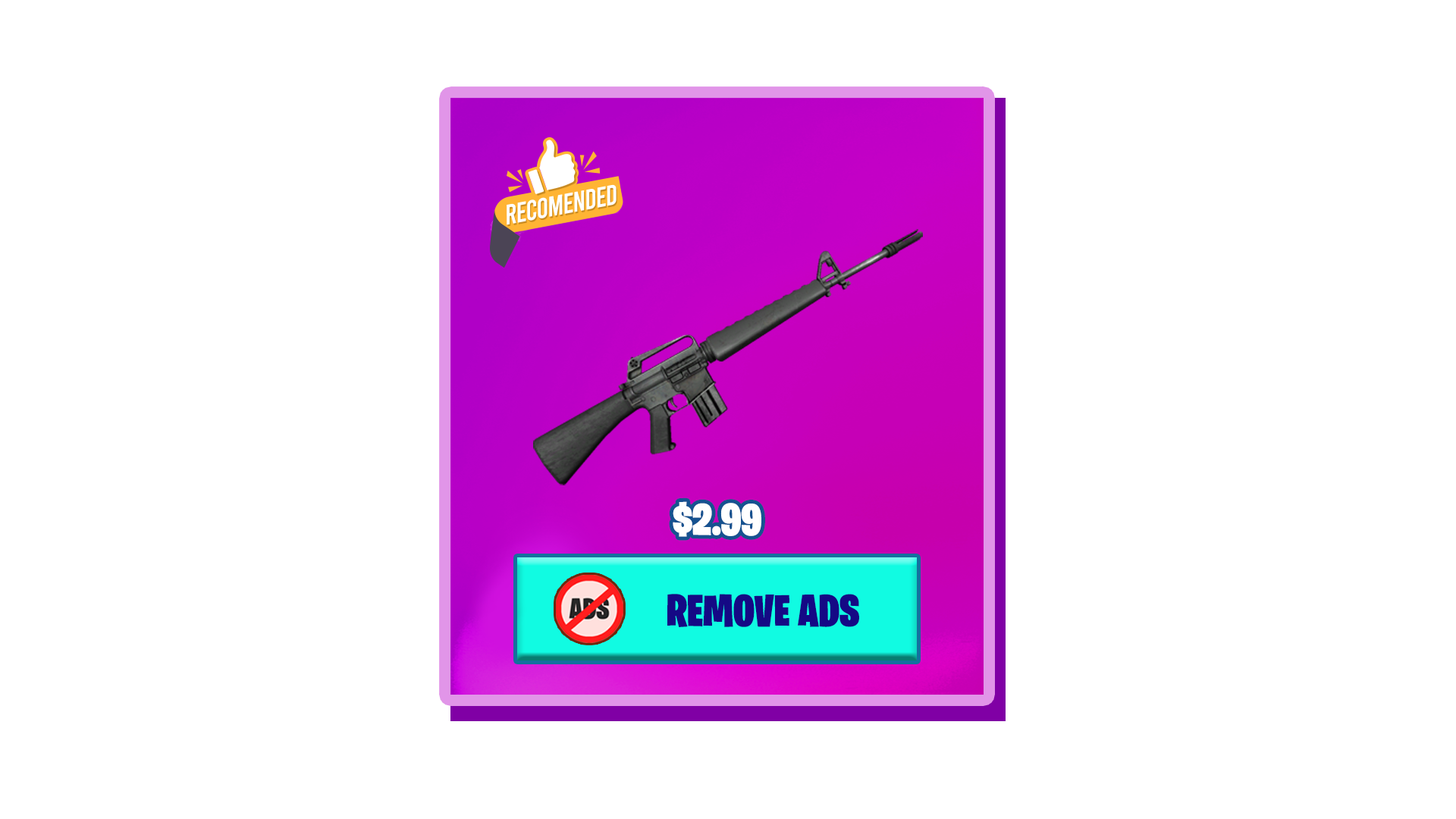
<style>
.page{position:relative;width:1456px;height:819px;background:#ffffff}
.page>*{position:absolute;margin:0}
.t1{font:44.8px "BurbankBigCondensed-Black";color:#ffffff}
.t2{font:44.8px "BurbankBigCondensed-Black";color:#150985}
</style>
<div class="page">
<p class="t1" style="left:673px;top:501px;width:88px;height:36px">$2.99</p>
<p class="t2" style="left:667px;top:594px;width:192px;height:33px">REMOVE ADS</p>
</div>
